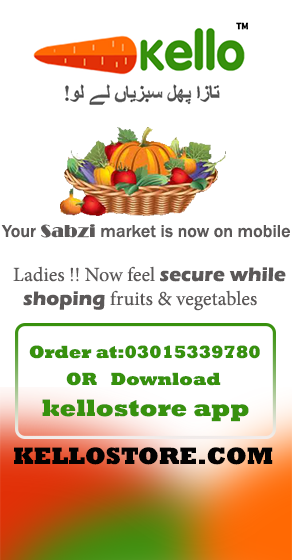
<style>
.page{position:relative;width:292px;height:560px;background:#ffffff}
.page>*{position:absolute;margin:0}
.t1{font:18px "FranklinGothic-Medium";color:#5b5858}
.t2{font:18px "Broadway";color:#5b5858}
.t3{font:20px "ErasITC-Bold";color:#5b5858}
.t4{font:20px "MinionPro-Regular";color:#5b5858}
.t5{font:18px "Rockwell-ExtraBold";color:#37910d}
.t6{font:24px "Rockwell-ExtraBold";color:#37910d}
.t7{font:24px "Rockwell-ExtraBold";color:#030202}
</style>
<div class="page">
<p class="t1" style="left:1px;top:224px;width:289px;height:14px">Your <span class="t2">Sabzi </span>market is now on mobile</p>
<p class="t3" style="left:13px;top:266px;width:273px;height:45px"><span class="t4">Ladies !! Now feel </span>secure while <br>  shoping<span class="t4"> fruits &amp; vegetables</span></p>
<p class="t5" style="left:29px;top:345px;width:231px;height:14px">Order at:03015339780</p>
<p class="t5" style="left:66px;top:372px;width:155px;height:14px">OR   Download</p>
<p class="t6" style="left:42px;top:399px;width:207px;height:23px">kellostore app</p>
<p class="t7" style="left:14px;top:447px;width:259px;height:18px">KELLOSTORE.COM</p>
</div>
